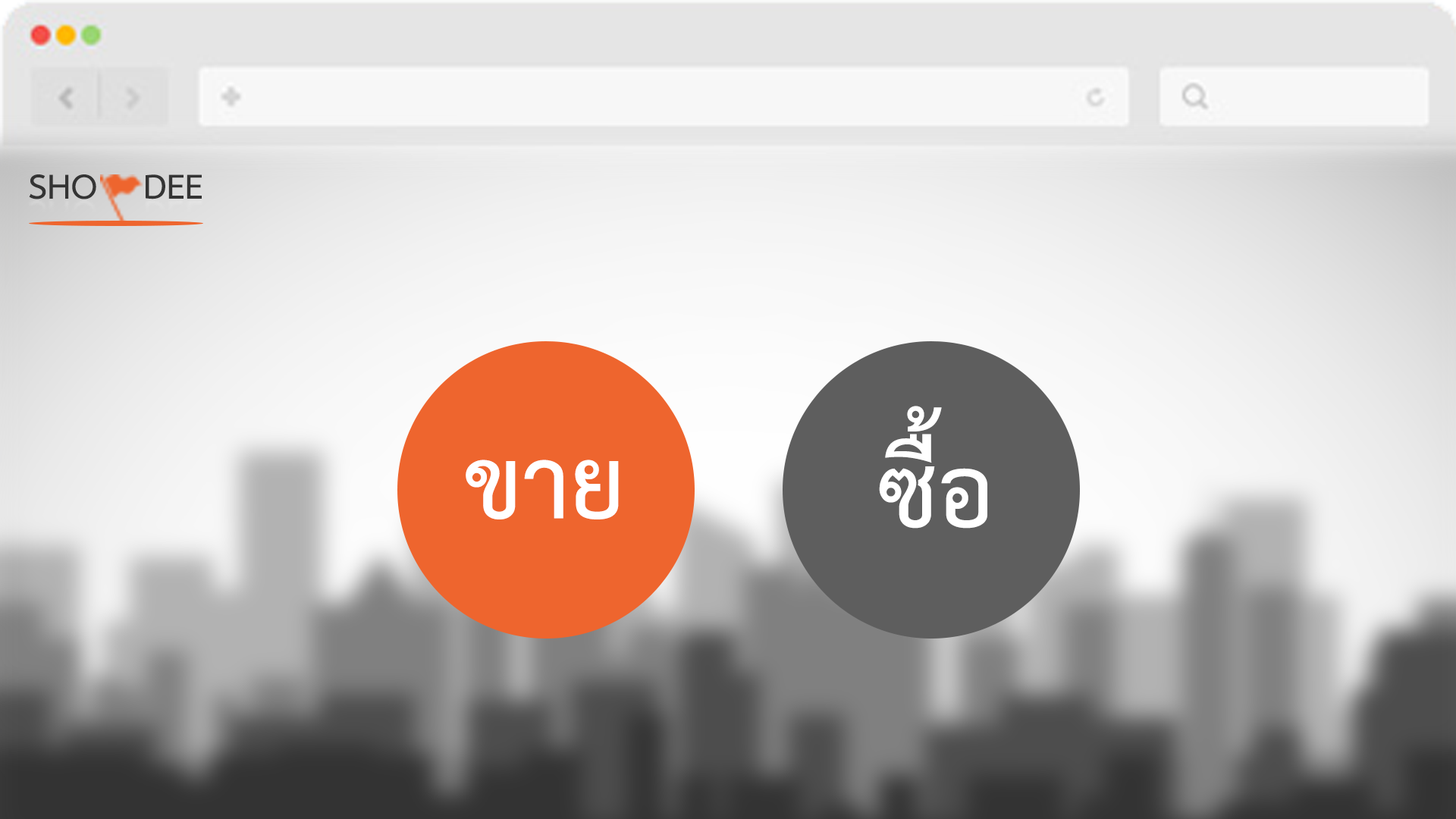
<style>
.page{position:relative;width:1456px;height:819px}
.page>*{position:absolute;margin:0}
.t1{font:49.5px "THSarabunPSK-Bold";color:#343434}
.t2{font:142.9px "THSarabunPSK-Bold";color:#ffffff}
</style>
<div class="page">
<p class="t1" style="left:29px;top:174px;width:173px;height:25px">SHO    DEE</p>
<p class="t2" style="left:879px;top:406px;width:108px;height:123px">ซื้อ</p>
<p class="t2" style="left:466px;top:460px;width:153px;height:59px">ขาย</p>
</div>
